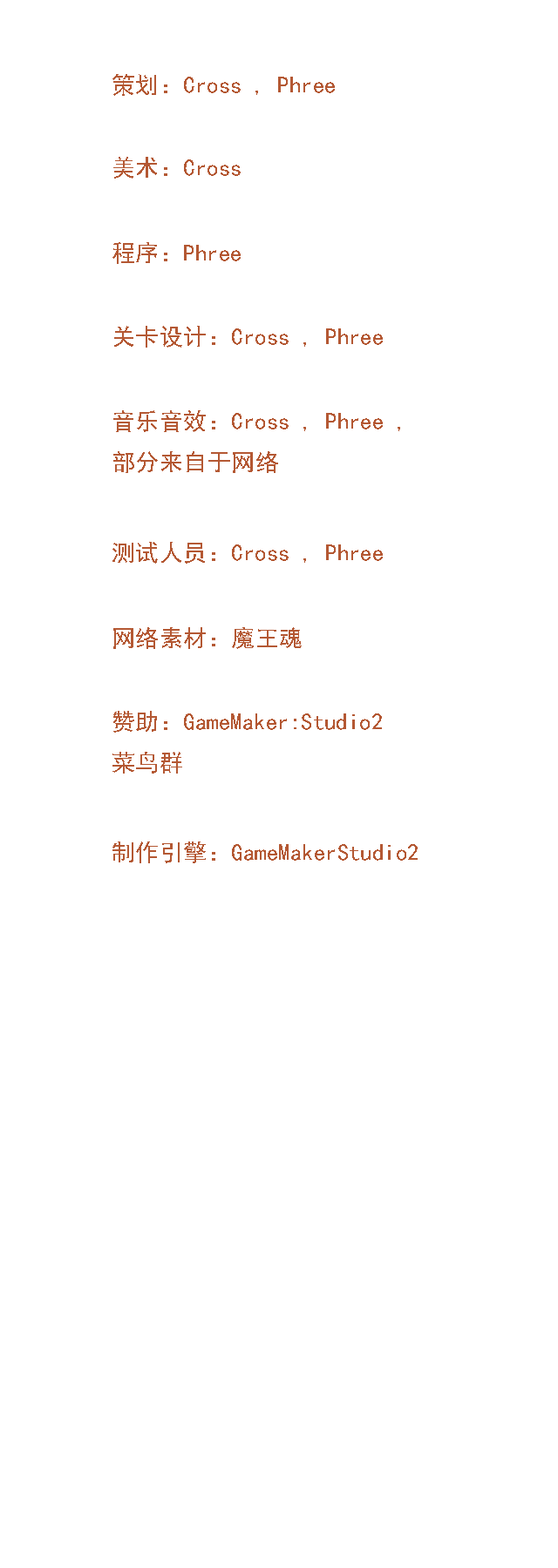
<style>
.page{position:relative;width:558px;height:1568px;background:#ffffff}
.page>*{position:absolute;margin:0}
.t1{font:23.2px "SimHei";letter-spacing:-0.02em;color:#b45833}
</style>
<div class="page">
<p class="t1" style="left:112px;top:74px;width:223px;height:22px">策划：Cross , Phree</p>
<p class="t1" style="left:113px;top:157px;width:127px;height:22px">美术：Cross</p>
<p class="t1" style="left:112px;top:242px;width:128px;height:22px">程序：Phree</p>
<p class="t1" style="left:114px;top:326px;width:268px;height:22px">关卡设计：Cross , Phree</p>
<p class="t1" style="left:113px;top:410px;width:287px;height:63px">音乐音效：Cross , Phree , <br>部分来自于网络</p>
<p class="t1" style="left:112px;top:542px;width:270px;height:22px">测试人员：Cross , Phree</p>
<p class="t1" style="left:113px;top:627px;width:188px;height:22px">网络素材：魔王魂</p>
<p class="t1" style="left:112px;top:711px;width:270px;height:63px">赞助：GameMaker:Studio2 <br>菜鸟群</p>
<p class="t1" style="left:112px;top:841px;width:305px;height:22px">制作引擎：GameMakerStudio2</p>
</div>
